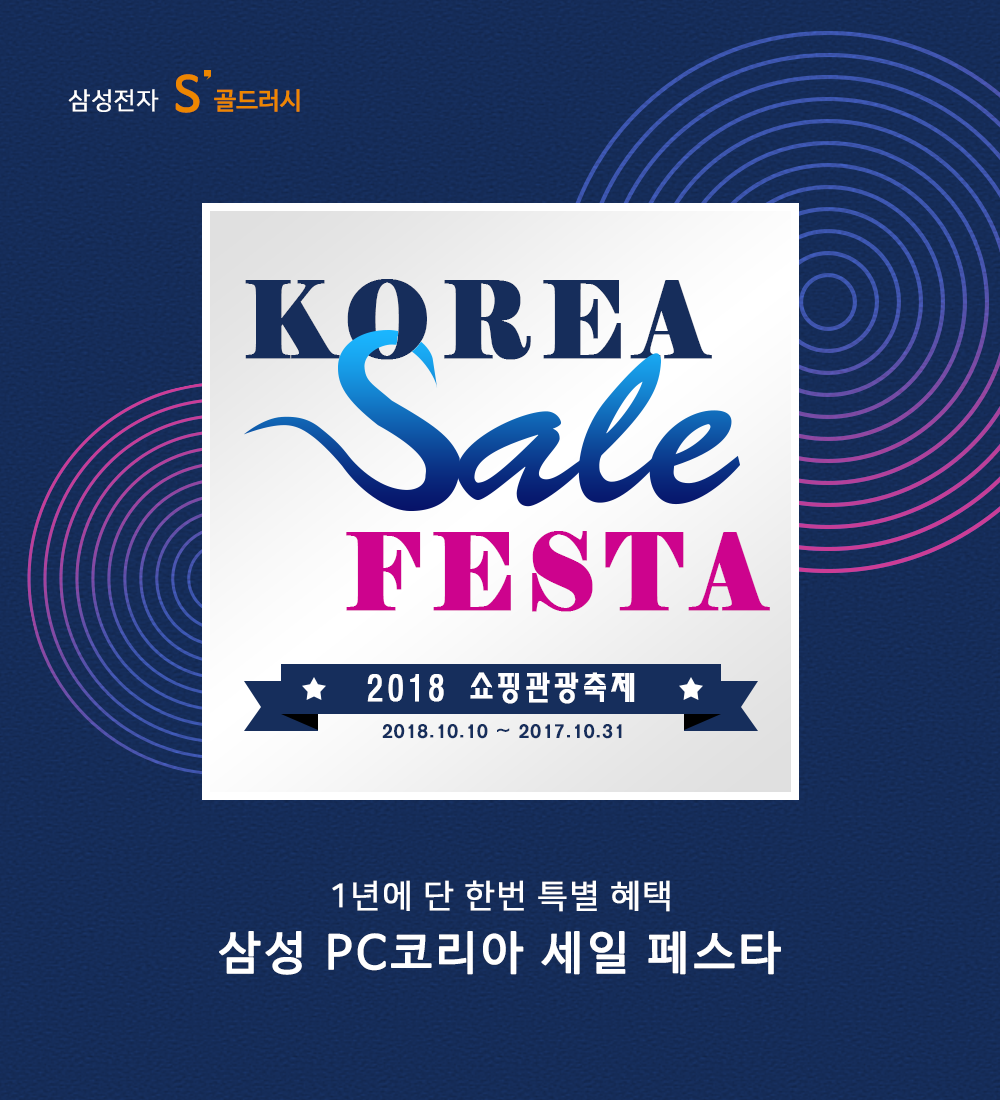
<style>
.page{position:relative;width:1000px;height:1100px}
.page>*{position:absolute;margin:0}
.t1{font:47.5px "NanumBarunGothicOTF";color:#ed8600;font-weight:bold}
.t2{font:24px "NanumSquareOTFR";color:#ffffff;font-weight:bold}
.t3{font:24px "NanumBarunGothicOTF";color:#ed8600;font-weight:bold}
.t4{font:104.5px "Elephant-Regular";letter-spacing:0.1em;color:#162d5b;font-weight:bold;scale:0.91 1}
.t5{font:104.5px "Elephant-Regular";letter-spacing:0.1em;color:#cd038d;font-weight:bold;scale:0.91 1}
.t6{font:33px "MoeumTR-HM";letter-spacing:0.1em;color:#fefeff;font-weight:bold;scale:0.91 1}
.t7{font:18px "Yj-TEUNTEUN--Bold";color:#162e5c;font-weight:bold}
.t8{font:32.4px "NanumSquareOTFR";letter-spacing:0.025em;color:#ffffff;font-weight:bold}
.t9{font:45.7px "NanumBarunGothicOTF";letter-spacing:0.075em;color:#ffffff;font-weight:bold}
</style>
<div class="page">
<p class="t1" style="left:175px;top:74px;width:25px;height:39px">S</p>
<p class="t2" style="left:68px;top:89px;width:91px;height:23px">삼성전자</p>
<p class="t3" style="left:214px;top:89px;width:86px;height:23px">골드러시</p>
<p class="t4" style="left:245px;top:279px;width:467px;height:81px">KOREA</p>
<p class="t5" style="left:346px;top:531px;width:424px;height:81px">FESTA</p>
<p class="t6" style="left:367px;top:672px;width:268px;height:32px">2018 쇼핑관광축제</p>
<p class="t7" style="left:382px;top:724px;width:240px;height:15px">2018.10.10 ~ 2017.10.31</p>
<p class="t8" style="left:332px;top:880px;width:338px;height:32px">1년에 단 한번 특별 혜택</p>
<p class="t9" style="left:219px;top:931px;width:562px;height:44px">삼성 PC코리아 세일 페스타</p>
</div>
